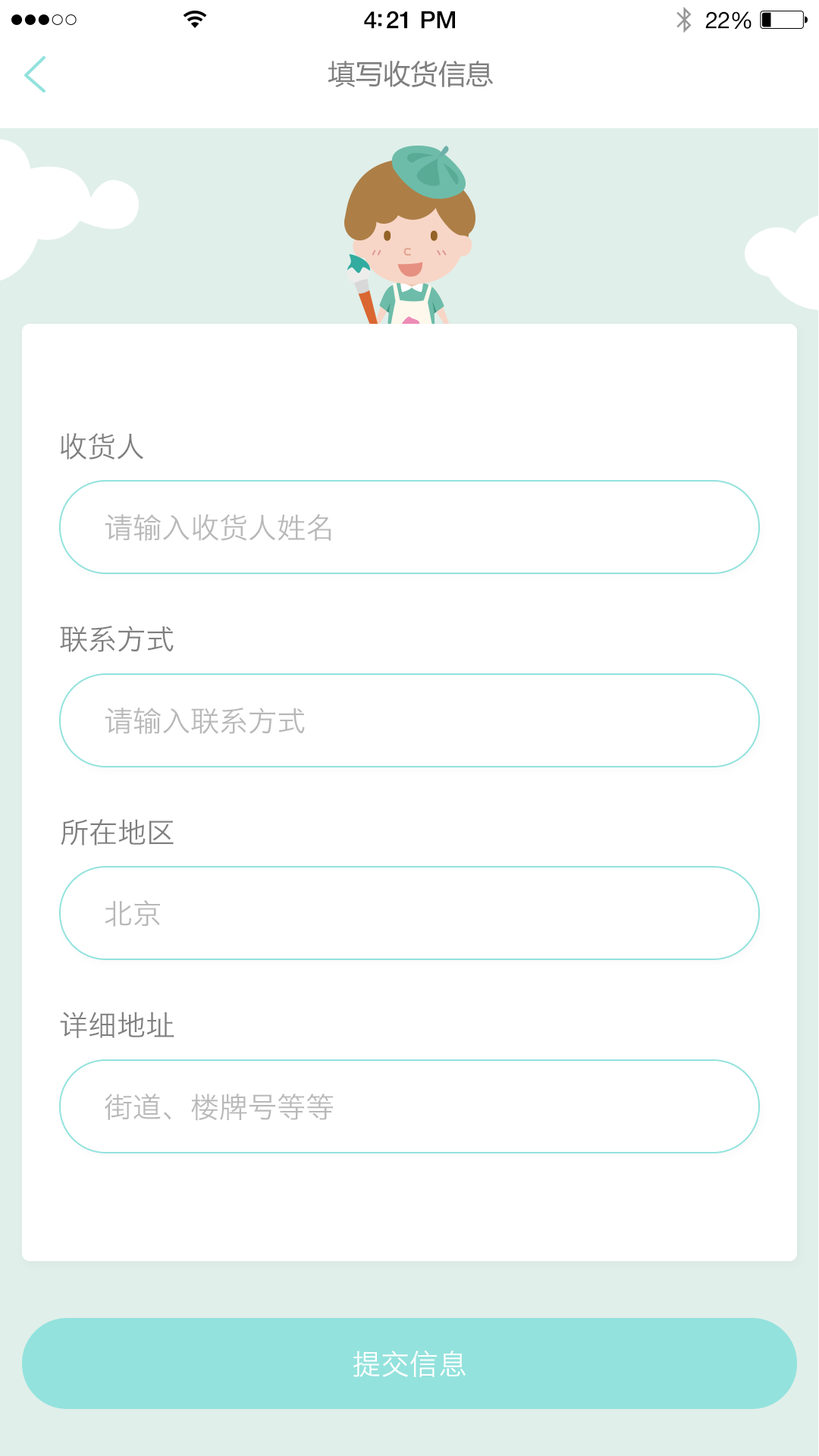
<style>
.page{position:relative;width:819px;height:1456px;background:#ffffff}
.page>*{position:absolute;margin:0}
.t1{font:23.9px "HelveticaNeue-Medium";letter-spacing:-0.02em;color:#000000}
.t2{font:22.9px "HelveticaNeue";letter-spacing:-0.02em;color:#000000}
.t3{font:27.3px "MicrosoftYaHei";color:#7f7f7f}
.t4{font:28.8px "HiraginoSansGB-W3";color:#7f7f7f}
.t5{font:28.8px "HiraginoSansGB-W3";color:#b8b8b9}
.t6{font:28.8px "HiraginoSansGB-W3";color:#ffffff}
</style>
<div class="page">
<p class="t1" style="left:364px;top:11px;width:91px;height:18px">4:21 PM</p>
<p class="t2" style="left:705px;top:11px;width:46px;height:18px">22%</p>
<p class="t3" style="left:328px;top:61px;width:165px;height:26px">填写收货信息</p>
<p class="t4" style="left:61px;top:433px;width:82px;height:27px">收货人</p>
<p class="t5" style="left:105px;top:513px;width:226px;height:28px">请输入收货人姓名</p>
<p class="t4" style="left:60px;top:626px;width:114px;height:26px">联系方式</p>
<p class="t5" style="left:105px;top:708px;width:200px;height:26px">请输入联系方式</p>
<p class="t4" style="left:61px;top:819px;width:113px;height:27px">所在地区</p>
<p class="t5" style="left:105px;top:900px;width:55px;height:27px">北京</p>
<p class="t4" style="left:60px;top:1012px;width:114px;height:26px">详细地址</p>
<p class="t5" style="left:105px;top:1094px;width:228px;height:27px">街道、楼牌号等等</p>
<p class="t6" style="left:353px;top:1350px;width:113px;height:27px">提交信息</p>
</div>
